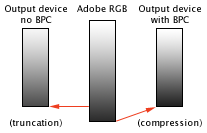
<style>
.page{position:relative;width:207px;height:133px;background:#ffffff}
.page>*{position:absolute;margin:0}
.t1{font:9px "LucidaGrande";color:#000000}
</style>
<div class="page">
<p class="t1" style="left:5px;top:5px;width:62px;height:18px;text-align:center">Output device<br>no BPC</p>
<p class="t1" style="left:77px;top:5px;width:50px;height:7px">Adobe RGB</p>
<p class="t1" style="left:139px;top:5px;width:62px;height:18px;text-align:center">Output device<br>with BPC</p>
<p class="t1" style="left:10px;top:119px;width:52px;height:9px">(truncation)</p>
<p class="t1" style="left:138px;top:119px;width:64px;height:9px">(compression)</p>
</div>
